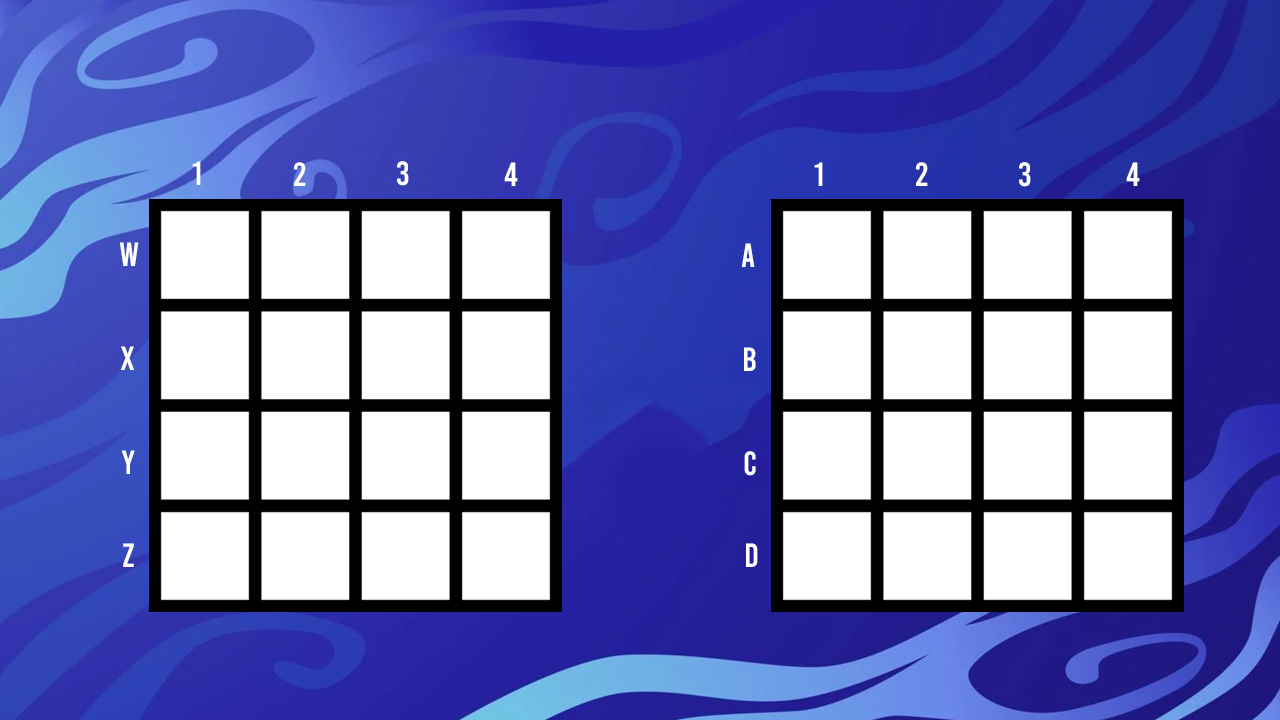
<style>
.page{position:relative;width:1280px;height:720px;background:#ffffff}
.page>*{position:absolute;margin:0}
.t1{font:33.6px "Bebas-Regular";color:#ffffff}
</style>
<div class="page">
<p class="t1" style="left:192px;top:161px;width:9px;height:24px">1</p>
<p class="t1" style="left:397px;top:161px;width:12px;height:25px">3</p>
<p class="t1" style="left:294px;top:162px;width:12px;height:24px">2</p>
<p class="t1" style="left:504px;top:162px;width:14px;height:24px">4</p>
<p class="t1" style="left:814px;top:162px;width:9px;height:24px">1</p>
<p class="t1" style="left:916px;top:162px;width:12px;height:24px">2</p>
<p class="t1" style="left:1019px;top:162px;width:12px;height:25px">3</p>
<p class="t1" style="left:1126px;top:162px;width:14px;height:24px">4</p>
<p class="t1" style="left:120px;top:242px;width:19px;height:24px">W</p>
<p class="t1" style="left:741px;top:243px;width:14px;height:24px">A</p>
<p class="t1" style="left:120px;top:346px;width:14px;height:24px">X</p>
<p class="t1" style="left:744px;top:347px;width:12px;height:24px">B</p>
<p class="t1" style="left:121px;top:450px;width:14px;height:24px">Y</p>
<p class="t1" style="left:744px;top:451px;width:12px;height:25px">C</p>
<p class="t1" style="left:123px;top:543px;width:11px;height:24px">Z</p>
<p class="t1" style="left:746px;top:543px;width:12px;height:24px">D</p>
</div>
